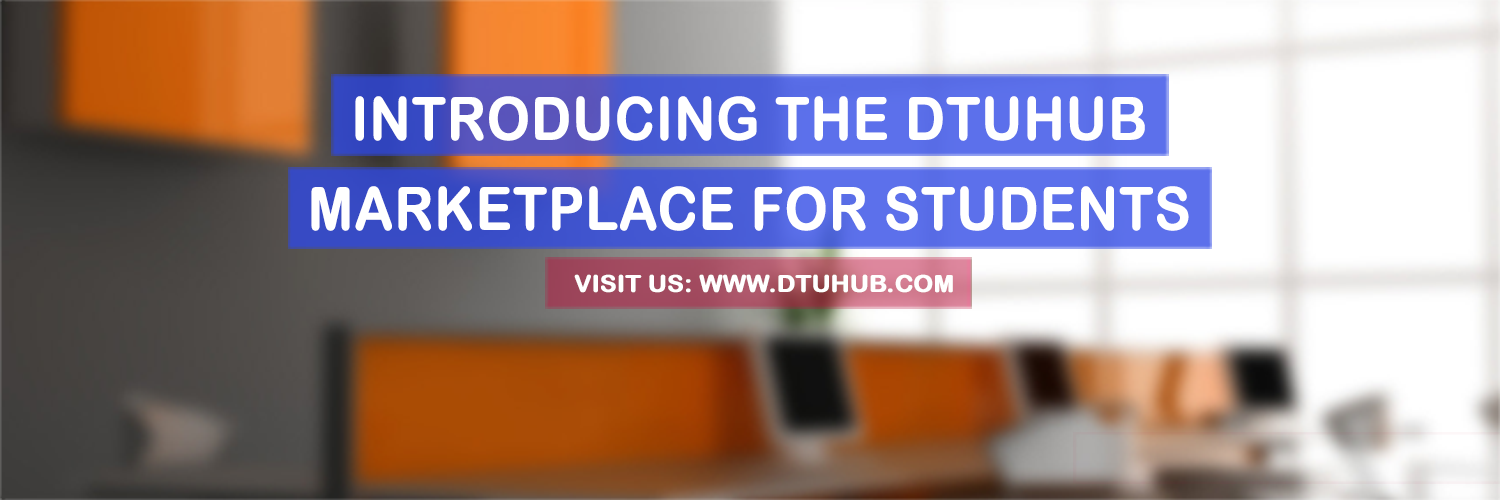
<style>
.page{position:relative;width:1500px;height:500px}
.page>*{position:absolute;margin:0}
.t1{font:59.1px "ArialRoundedMTBold";color:#ffffff;text-transform:uppercase;font-weight:bold;scale:0.91 1}
</style>
<div class="page">
<p class="t1" style="left:355px;top:96px;width:790px;height:45px">INTRODUCING THE DTUHUB</p>
<p class="t1" style="left:311px;top:186px;width:878px;height:45px">Marketplace for students</p>
</div>
